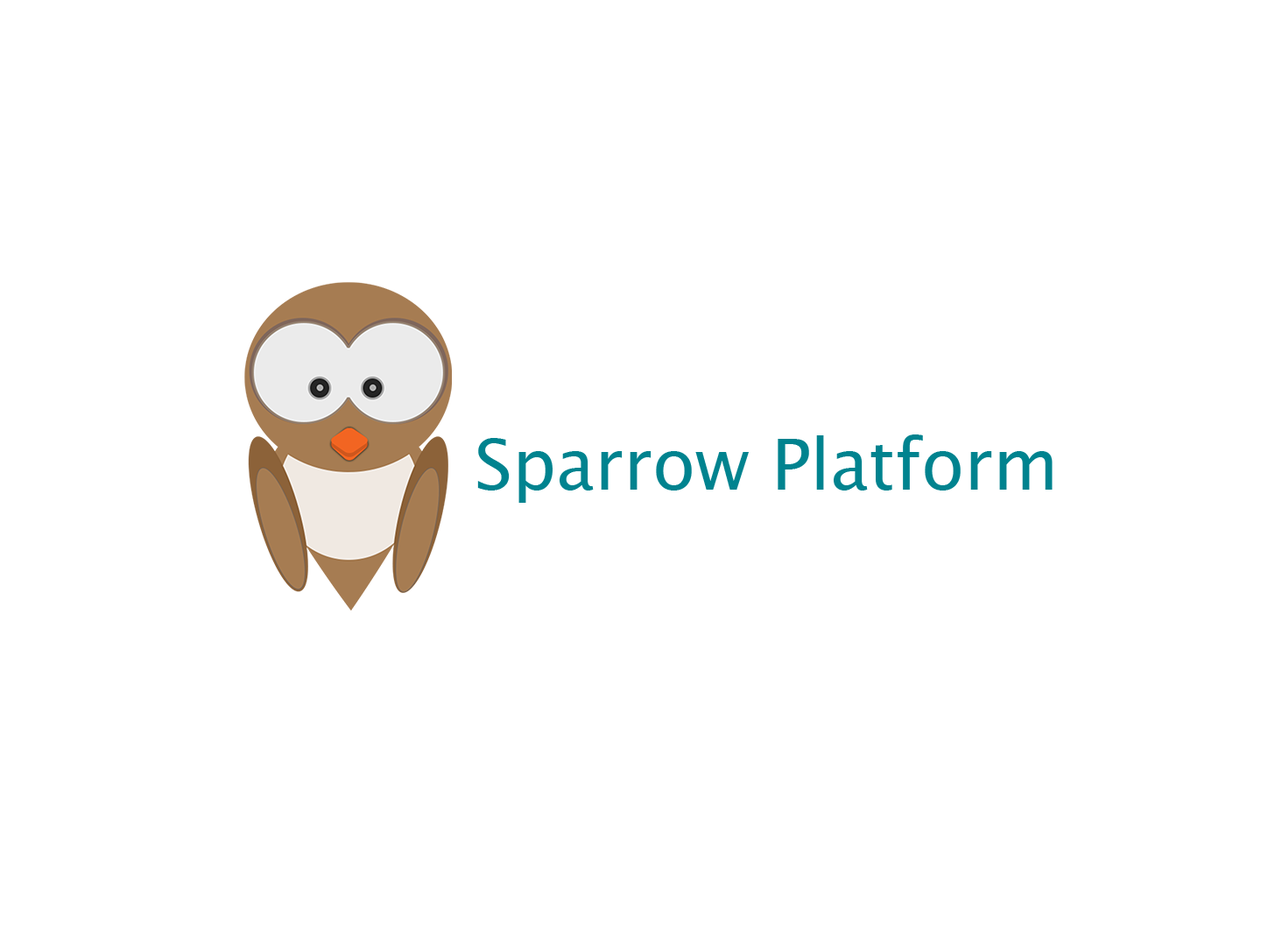
<style>
.page{position:relative;width:1261px;height:946px;background:#ffffff}
.page>*{position:absolute;margin:0}
.t1{font:70.1px "LucidaSansUnicode";color:#00838f}
</style>
<div class="page">
<p class="t1" style="left:477px;top:434px;width:576px;height:69px">Sparrow Platform</p>
</div>
